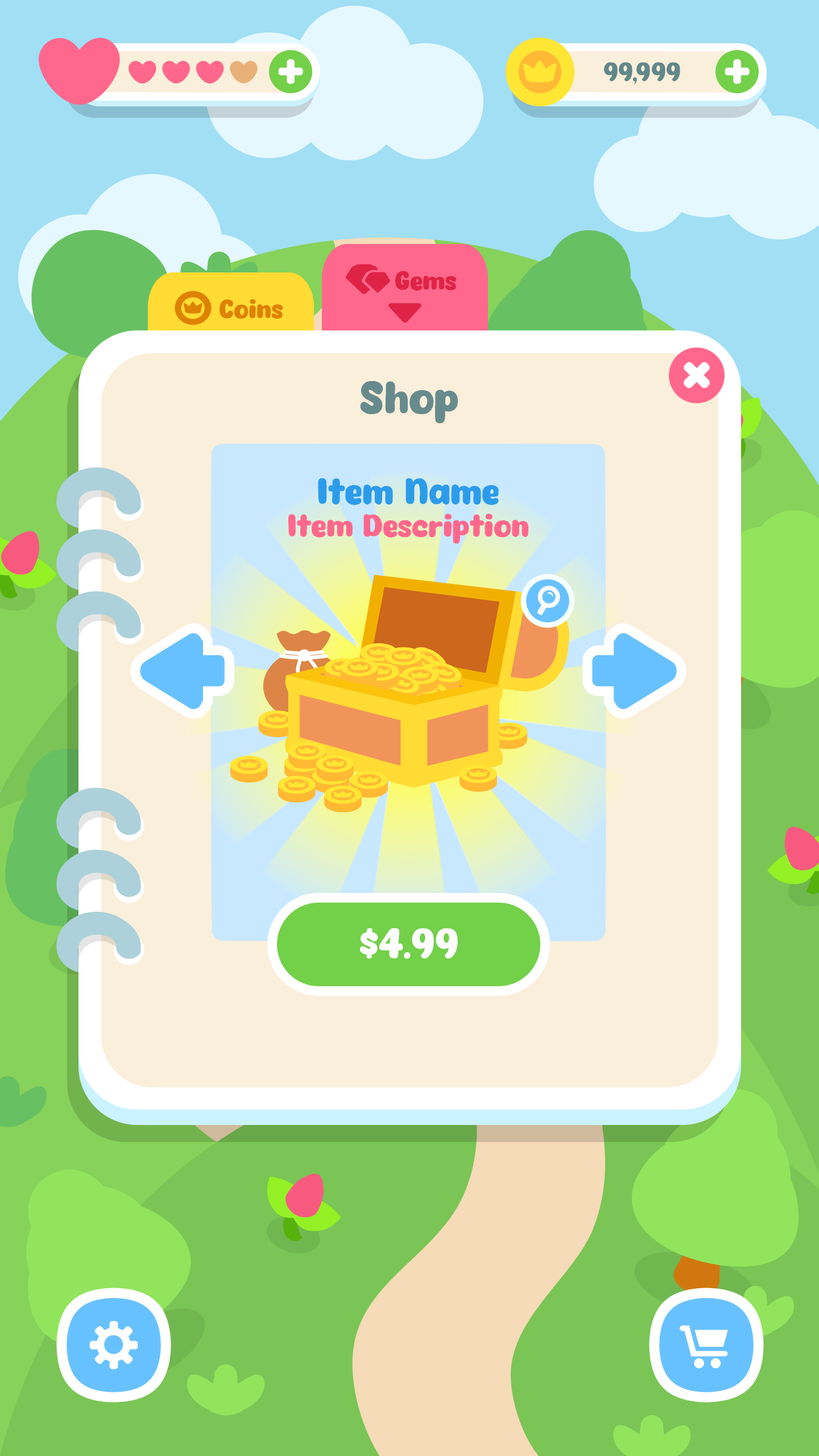
<style>
.page{position:relative;width:819px;height:1456px}
.page>*{position:absolute;margin:0}
.t1{font:25.6px "Eazy-Chat";color:#df2347}
.t2{font:25.6px "Eazy-Chat";color:#de8201}
.t3{font:43.8px "Eazy-Chat";color:#678b8d}
.t4{font:35.8px "Eazy-Chat";color:#2c9cea}
.t5{font:30.7px "Eazy-Chat";color:#ff688c}
.t6{font:41px "Eazy-Chat";color:#fffeff}
</style>
<div class="page">
<p class="t1" style="left:395px;top:271px;width:62px;height:20px">Gems</p>
<p class="t2" style="left:220px;top:299px;width:63px;height:20px">Coins</p>
<p class="t3" style="left:360px;top:381px;width:98px;height:43px">Shop</p>
<p class="t4" style="left:318px;top:478px;width:181px;height:27px">Item Name</p>
<p class="t5" style="left:288px;top:514px;width:240px;height:30px">Item Description</p>
<p class="t6" style="left:359px;top:928px;width:99px;height:31px">$4.99</p>
</div>
